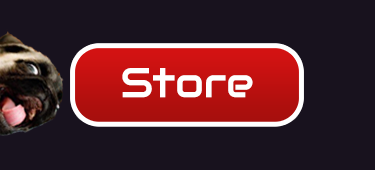
<style>
.page{position:relative;width:375px;height:170px;background:#18121e}
.page>*{position:absolute;margin:0}
.t1{font:41.7px "Audiowide-Regular";color:#ffffff}
</style>
<div class="page">
<p class="t1" style="left:122px;top:68px;width:131px;height:30px">Store</p>
</div>
